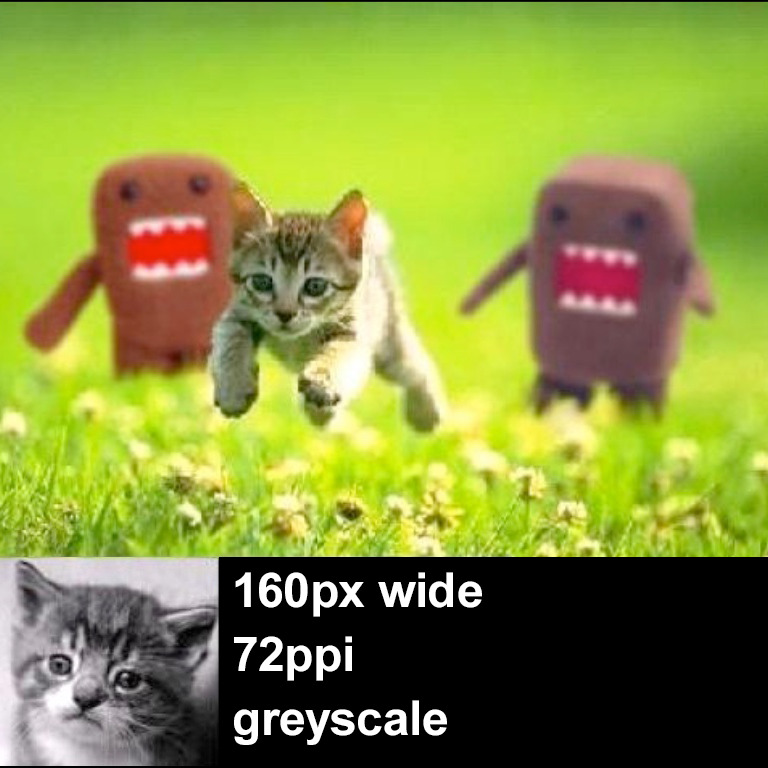
<style>
.page{position:relative;width:768px;height:768px}
.page>*{position:absolute;margin:0}
.t1{font:48px/64px "Arial-BoldMT";color:#ffffff}
</style>
<div class="page">
<p class="t1" style="left:234px;top:572px;width:248px;height:173px">160px wide<br>72ppi<br>greyscale</p>
</div>
